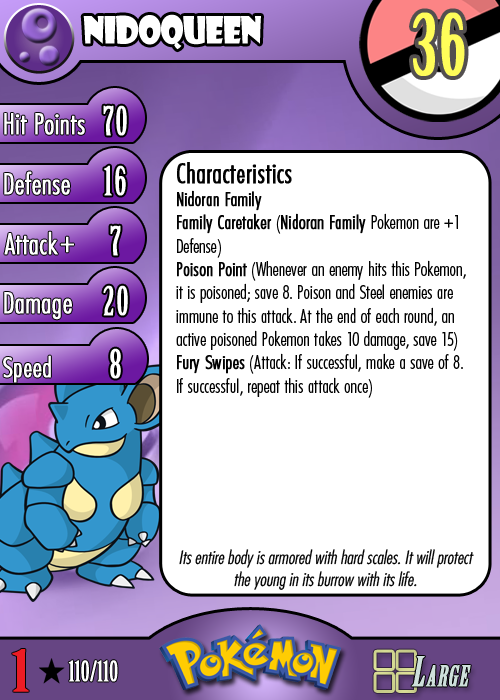
<style>
.page{position:relative;width:500px;height:700px;background:#ffffff}
.page>*{position:absolute;margin:0}
.t1{font:36.7px "ShowcardGothic-Reg";letter-spacing:-0.025em;color:#ffffff;scale:0.91 1}
.t2{font:83.3px "BirchStd";letter-spacing:0.025em;color:#fffd59;font-weight:bold}
.t3{font:27.8px "Futura-CondensedLight";color:#ffffff;font-weight:bold}
.t4{font:38.9px "BirchStd";letter-spacing:0.035em;color:#ffffff;font-weight:bold}
.t5{font:19.4px "FuturaCondensedBQ-Light";color:#010101}
.t6{font:27.8px "FuturaCondensedBQ-Light";color:#010101;font-weight:bold}
.t7{font:19.4px "FuturaCondensedBQ-Light";color:#010101;font-weight:bold}
.t8{font:30.6px "Futura-CondensedLight";color:#ffffff;font-weight:bold}
.t9{font:27.8px "FuturaCondensedBQ-Light";color:#ffffff;font-weight:bold}
.t10{font:18.1px "Futura-CondensedLight";color:#010101;font-style:italic}
.t11{font:55.6px "BirchStd";color:#ed1c24;font-weight:bold;scale:1.5 1}
.t12{font:27.8px "BirchStd";color:#ffffff;font-weight:bold}
</style>
<div class="page">
<p class="t1" style="left:83px;top:14px;width:178px;height:36px">nidoqueen</p>
<p class="t2" style="left:413px;top:12px;width:52px;height:64px">36</p>
<p class="t3" style="left:4px;top:113px;width:81px;height:22px">Hit Points</p>
<p class="t4" style="left:103px;top:105px;width:24px;height:31px">70</p>
<p class="t3" style="left:4px;top:171px;width:66px;height:24px">Defense</p>
<p class="t4" style="left:104px;top:165px;width:22px;height:31px">16</p>
<p class="t5" style="left:176px;top:162px;width:290px;height:236px"><span class="t6">Characteristics<br></span><span class="t7">Nidoran Family<br>Family Caretaker</span> (<span class="t7">Nidoran Family </span>Pokemon are +1 Defense)<br><span class="t7">Poison Point</span> (Whenever an enemy hits this Pokemon, it is poisoned; save 8. Poison and Steel enemies are immune to this attack. At the end of each round, an active poisoned Pokemon takes 10 damage, save 15)<br><span class="t7">Fury Swipes</span> (Attack: If successful, make a save of 8. If successful, repeat this attack once)</p>
<p class="t3" style="left:4px;top:231px;width:54px;height:24px">Attack</p>
<p class="t4" style="left:110px;top:225px;width:11px;height:31px">7</p>
<p class="t8" style="left:60px;top:236px;width:14px;height:17px">+</p>
<p class="t3" style="left:4px;top:292px;width:68px;height:28px">Damage</p>
<p class="t4" style="left:103px;top:285px;width:25px;height:31px">20</p>
<p class="t4" style="left:110px;top:348px;width:11px;height:31px">8</p>
<p class="t9" style="left:3px;top:355px;width:48px;height:28px">Speed</p>
<p class="t10" style="left:179px;top:549px;width:295px;height:41px;text-align:center">Its entire body is armored with hard scales. It will protect the young in its burrow with its life.</p>
<p class="t11" style="left:12px;top:649px;width:17px;height:43px">1</p>
<p class="t12" style="left:68px;top:660px;width:50px;height:22px">110/110</p>
</div>
